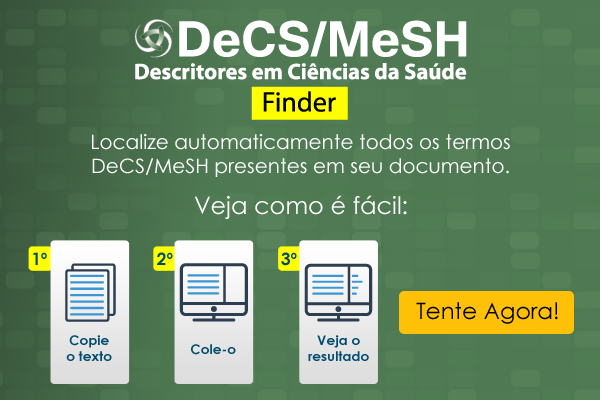
<style>
.page{position:relative;width:600px;height:400px}
.page>*{position:absolute;margin:0}
.t1{font:20px "CenturyGothic";color:#ffffff}
.t2{font:24px "CenturyGothic";color:#ffffff}
.t3{font:16.9px "CenturyGothic-Bold";color:#014c6e}
.t4{font:22.8px "CenturyGothic";color:#000000}
.t5{font:13.3px "CenturyGothic-Bold";color:#014c6e}
</style>
<div class="page">
<p class="t1" style="left:92px;top:134px;width:418px;height:43px;text-align:center">Localize automaticamente todos os termos DeCS/MeSH presentes em seu documento.</p>
<p class="t2" style="left:194px;top:195px;width:213px;height:24px">Veja como é fácil:</p>
<p class="t3" style="left:32px;top:252px;width:15px;height:13px">1º</p>
<p class="t3" style="left:157px;top:252px;width:16px;height:13px">2º</p>
<p class="t3" style="left:281px;top:252px;width:16px;height:14px">3º</p>
<p class="t4" style="left:416px;top:302px;width:142px;height:22px">Tente Agora!</p>
<p class="t5" style="left:66px;top:335px;width:46px;height:26px;text-align:center">Copie<br>o texto</p>
<p class="t5" style="left:308px;top:335px;width:61px;height:26px;text-align:center">Veja o<br>resultado</p>
<p class="t5" style="left:191px;top:344px;width:45px;height:11px">Cole-o</p>
</div>
